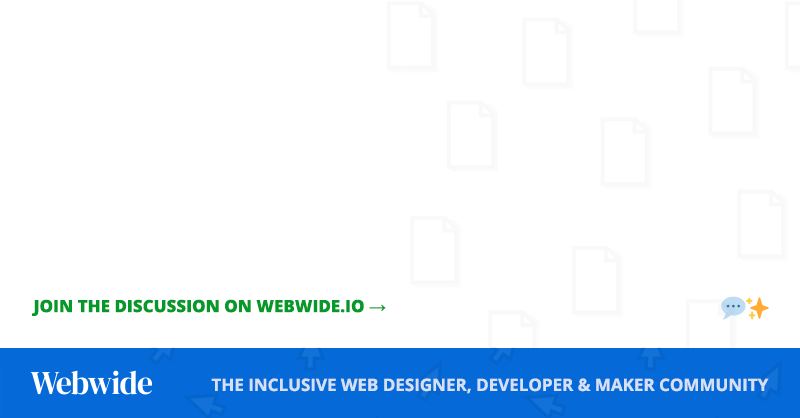
<style>
.page{position:relative;width:800px;height:418px;background:#ffffff}
.page>*{position:absolute;margin:0}
.t1{font:17px "OpenSans-Extrabold";color:#059929}
.t2{font:17px "TimesNewRomanPSMT";color:#059929}
.t3{font:17px "OpenSans-Bold";color:#d4e0f6}
</style>
<div class="page">
<p class="t1" style="left:32px;top:299px;width:354px;height:17px">JOIN THE DISCUSSION ON WEBWIDE.IO <span class="t2">→</span></p>
<p class="t3" style="left:211px;top:378px;width:558px;height:16px">THE INCLUSIVE WEB DESIGNER, DEVELOPER &amp; MAKER COMMUNITY</p>
</div>
